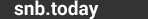
<style>
.page{position:relative;width:148px;height:19px;background:#333333}
.page>*{position:absolute;margin:0}
.t1{font:19px "Roboto-Bold";color:#ffffff}
</style>
<div class="page">
<p class="t1" style="left:14px;top:0px;width:85px;height:19px">snb.today</p>
</div>
